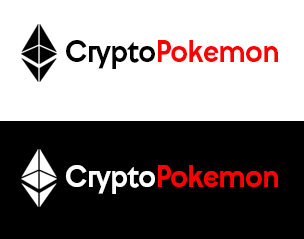
<style>
.page{position:relative;width:304px;height:239px;background:#000000}
.page>*{position:absolute;margin:0}
.t1{font:30px "Gertrude-regular";letter-spacing:-0.025em;color:#ff0000}
.t2{font:30px "Gertrude-regular";letter-spacing:-0.025em;color:#000000}
.t3{font:30px "Gertrude-regular";letter-spacing:-0.025em;color:#ffffff}
</style>
<div class="page">
<p class="t1" style="left:66px;top:40px;width:212px;height:29px"><span class="t2">Crypto</span>Pokemon</p>
<p class="t1" style="left:66px;top:165px;width:212px;height:29px"><span class="t3">Crypto</span>Pokemon</p>
</div>
